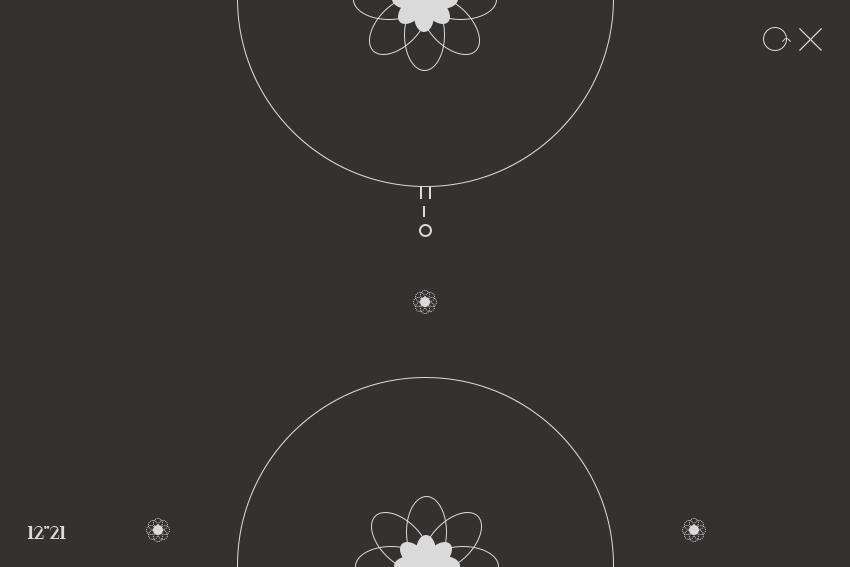
<style>
.page{position:relative;width:850px;height:567px;background:#343131}
.page>*{position:absolute;margin:0}
.t1{font:18px "LondonFill";color:#dadada}
</style>
<div class="page">
<p class="t1" style="left:27px;top:526px;width:39px;height:13px">12”21</p>
</div>
